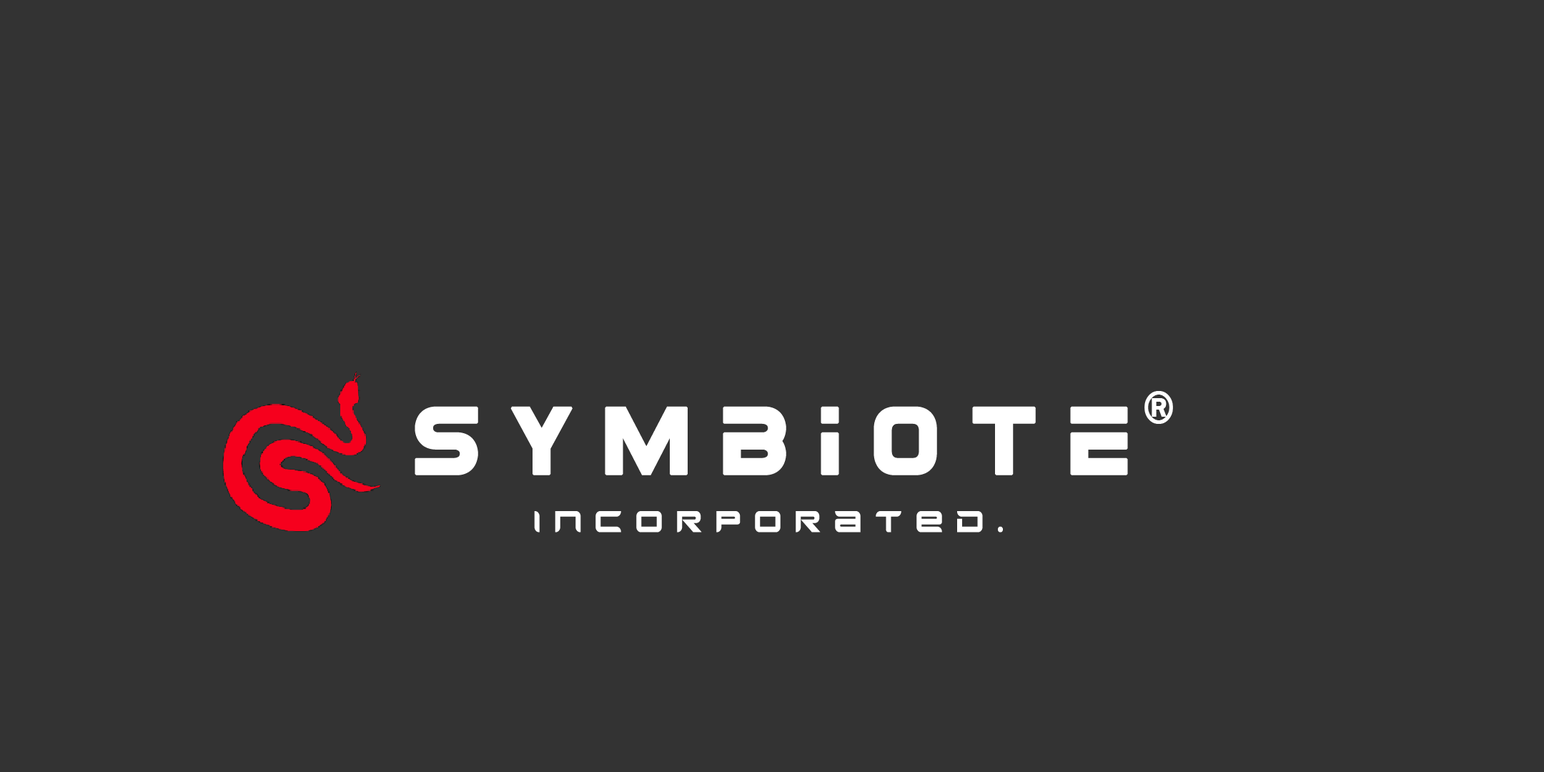
<style>
.page{position:relative;width:1544px;height:772px;background:#333333}
.page>*{position:absolute;margin:0}
.t1{font:45.5px "FranklinGothic-Medium";letter-spacing:0.82em;color:#ffffff;font-weight:bold;scale:0.86 1}
.t2{font:96.8px "Eurofighter";letter-spacing:0.32em;color:#ffffff;font-weight:bold;scale:0.86 1}
.t3{font:20.7px "Radeon";letter-spacing:0.82em;color:#ffffff;font-weight:bold;scale:0.86 1}
</style>
<div class="page">
<p class="t1" style="left:1145px;top:391px;width:28px;height:33px">®</p>
<p class="t2" style="left:415px;top:406px;width:713px;height:69px">SYMBIOTE</p>
<p class="t3" style="left:534px;top:511px;width:469px;height:22px">INCORPORATED.</p>
</div>
